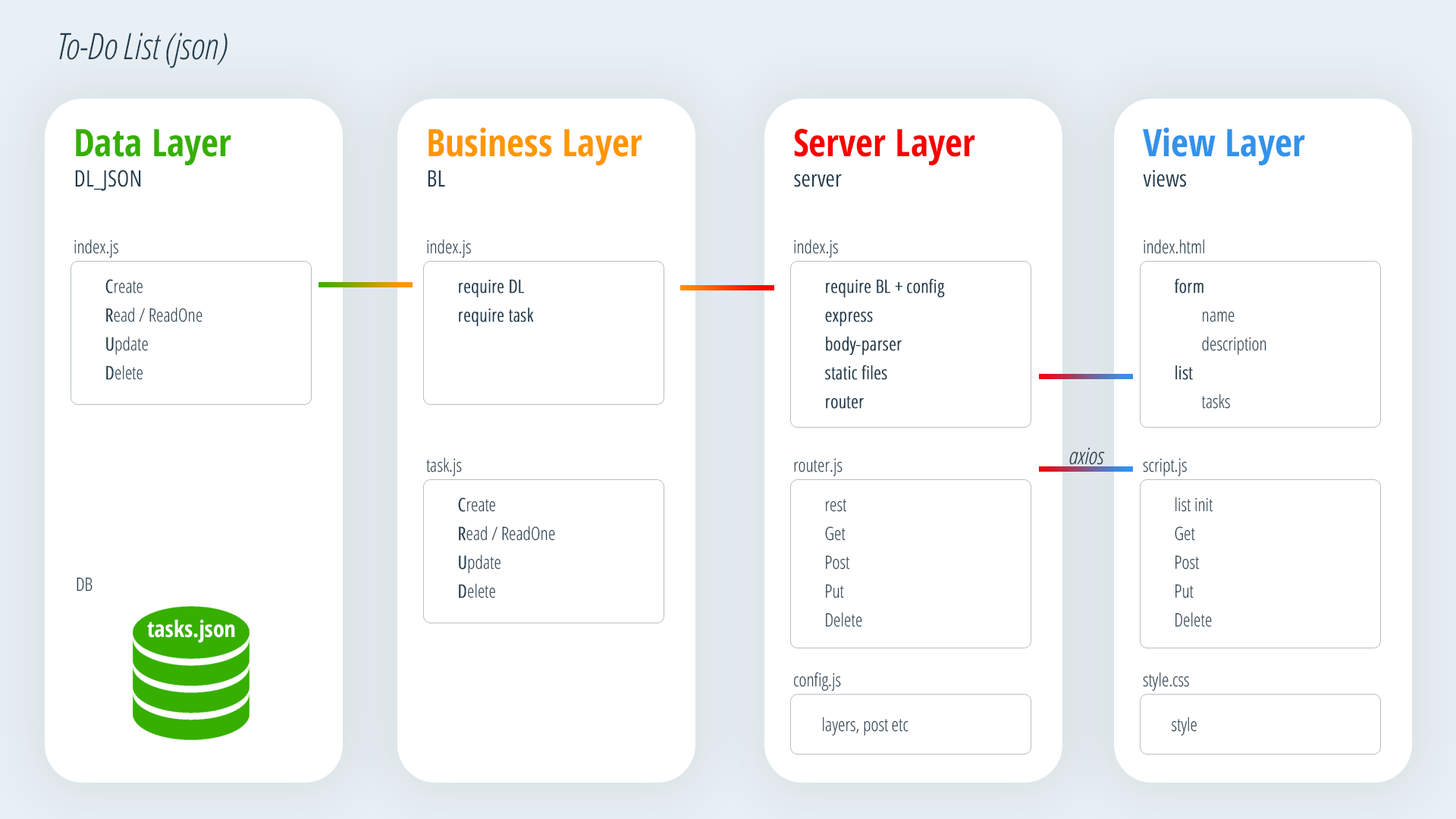
<style>
.page{position:relative;width:1456px;height:819px;background:#ffffff}
.page>*{position:absolute;margin:0}
.t1{font:36.4px "OpenSansHebrewCondensedLight-Italic";color:#223b4d}
.t2{font:37.9px "OpenSansHebrewCondensed-Bold";color:#36af00}
.t3{font:37.9px "OpenSansHebrewCondensed-Bold";color:#ff9600}
.t4{font:37.9px "OpenSansHebrewCondensed-Bold";color:#f70000}
.t5{font:37.9px "OpenSansHebrewCondensed-Bold";color:#3292eb}
.t6{font:22.7px "OpenSansHebrewCondensed-Regular";color:#223b4d}
.t7{font:18.2px "OpenSansHebrewCondensed-Light";color:#223b4d}
.t8{font:18.2px/28.8px "OpenSansHebrewCondensed-Light";color:#223b4d}
.t9{font:18.2px/28.8px "OpenSansHebrewCondensed-Light";color:#223b4d;font-weight:bold}
.t10{font:22.7px "OpenSansHebrewCondensedLight-Italic";color:#223b4d}
.t11{font:22.7px "OpenSansHebrewCondensed-Bold";color:#ffffff}
</style>
<div class="page">
<p class="t1" style="left:59px;top:33px;width:168px;height:35px">To-Do List (json)</p>
<p class="t2" style="left:76px;top:129px;width:155px;height:36px">Data Layer</p>
<p class="t3" style="left:428px;top:127px;width:214px;height:38px">Business Layer</p>
<p class="t4" style="left:794px;top:128px;width:181px;height:37px">Server Layer</p>
<p class="t5" style="left:1143px;top:127px;width:162px;height:38px">View Layer</p>
<p class="t6" style="left:75px;top:170px;width:66px;height:21px">DL_JSON</p>
<p class="t6" style="left:428px;top:170px;width:17px;height:17px">BL</p>
<p class="t6" style="left:794px;top:174px;width:48px;height:13px">server</p>
<p class="t6" style="left:1143px;top:170px;width:43px;height:17px">views</p>
<p class="t7" style="left:74px;top:239px;width:44px;height:19px">index.js</p>
<p class="t7" style="left:427px;top:239px;width:44px;height:19px">index.js</p>
<p class="t7" style="left:794px;top:239px;width:44px;height:19px">index.js</p>
<p class="t7" style="left:1144px;top:239px;width:60px;height:15px">index.html</p>
<p class="t8" style="left:105px;top:279px;width:97px;height:101px"><span class="t9">C</span>reate<br><span class="t9">R</span>ead / ReadOne<br><span class="t9">U</span>pdate<br><span class="t9">D</span>elete</p>
<p class="t9" style="left:459px;top:279px;width:75px;height:48px">require DL<br>require task</p>
<p class="t9" style="left:825px;top:278px;width:120px;height:131px">require BL + config<br>express<br>body-parser<br>static files<br>router</p>
<p class="t8" style="left:1174px;top:278px;width:92px;height:131px"><span class="t9">form<br> </span>name<br> description<br><span class="t9">list<br> </span>tasks</p>
<p class="t10" style="left:1069px;top:447px;width:36px;height:18px">axios</p>
<p class="t7" style="left:426px;top:457px;width:36px;height:19px">task.js</p>
<p class="t7" style="left:794px;top:458px;width:48px;height:18px">router.js</p>
<p class="t7" style="left:1143px;top:458px;width:44px;height:18px">script.js</p>
<p class="t8" style="left:458px;top:497px;width:97px;height:101px"><span class="t9">C</span>reate<br><span class="t9">R</span>ead / ReadOne<br><span class="t9">U</span>pdate<br><span class="t9">D</span>elete</p>
<p class="t8" style="left:1175px;top:497px;width:38px;height:130px">list init<br>Get<br>Post<br>Put<br>Delete</p>
<p class="t8" style="left:825px;top:499px;width:37px;height:128px">rest<br>Get<br>Post<br>Put<br>Delete</p>
<p class="t7" style="left:77px;top:577px;width:16px;height:14px">DB</p>
<p class="t11" style="left:147px;top:620px;width:88px;height:23px">tasks.json</p>
<p class="t7" style="left:794px;top:672px;width:47px;height:19px">config.js</p>
<p class="t7" style="left:1143px;top:672px;width:46px;height:19px">style.css</p>
<p class="t7" style="left:823px;top:717px;width:85px;height:19px">layers, post etc</p>
<p class="t7" style="left:1172px;top:717px;width:25px;height:19px">style</p>
</div>
